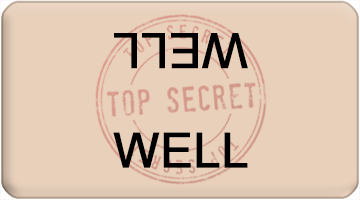
<style>
.page{position:relative;width:360px;height:200px;background:#e8d0bb}
.page>*{position:absolute;margin:0}
.t1{font:48px "ArialMT";color:#000000;font-weight:bold}
</style>
<div class="page">
<p class="t1" style="left:114px;top:33px;width:134px;height:36px;rotate:180deg">WELL</p>
<p class="t1" style="left:113px;top:132px;width:135px;height:36px">WELL</p>
</div>
